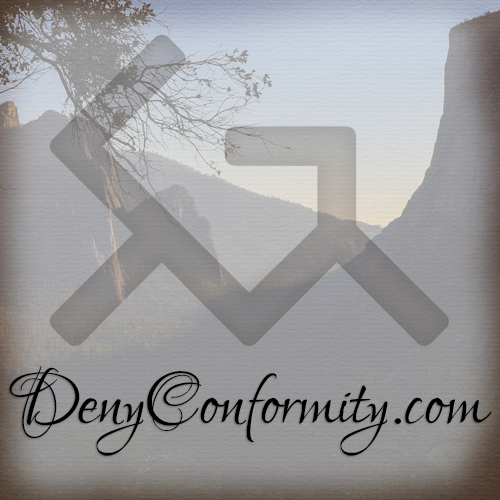
<style>
.page{position:relative;width:500px;height:500px}
.page>*{position:absolute;margin:0}
.t1{font:95.4px "LoversQuarrel-Regular";color:#000000}
</style>
<div class="page">
<p class="t1" style="left:9px;top:365px;width:483px;height:91px">DenyConformity.com</p>
</div>
